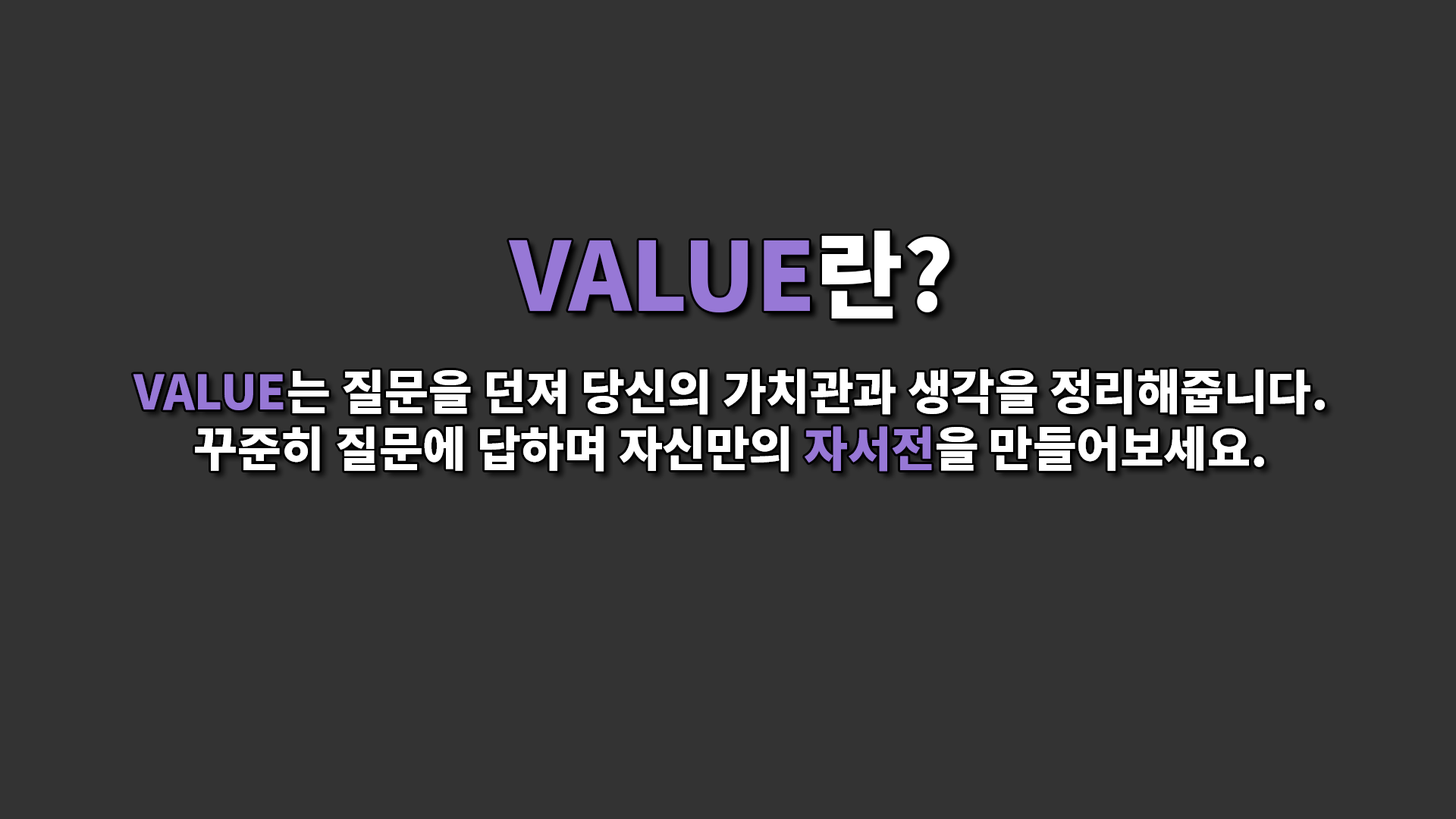
<style>
.page{position:relative;width:1456px;height:819px;background:#333333}
.page>*{position:absolute;margin:0}
.t1{font:94.8px "NotoSansCJKkr-Black";color:#9778d6}
.t2{font:94.8px "NotoSansCJKkr-Black";color:#ffffff}
.t3{font:47.4px "NotoSansCJKkr-Black";color:#ffffff}
.t4{font:47.4px "NotoSansCJKkr-Black";color:#9778d6}
</style>
<div class="page">
<p class="t1" style="left:509px;top:231px;width:440px;height:87px">VALUE<span class="t2">란?</span></p>
<p class="t3" style="left:133px;top:369px;width:1192px;height:103px;text-align:center"><span class="t4">VALUE</span>는 질문을 던져 당신의 가치관과 생각을 정리해줍니다.<br>꾸준히 질문에 답하며 자신만의 <span class="t4">자서전</span>을 만들어보세요.</p>
</div>
